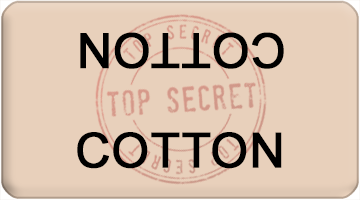
<style>
.page{position:relative;width:360px;height:200px;background:#e8d0bb}
.page>*{position:absolute;margin:0}
.t1{font:48px "ArialMT";color:#000000;font-weight:bold}
</style>
<div class="page">
<p class="t1" style="left:80px;top:32px;width:204px;height:37px;rotate:180deg">COTTON</p>
<p class="t1" style="left:77px;top:132px;width:205px;height:37px">COTTON</p>
</div>
